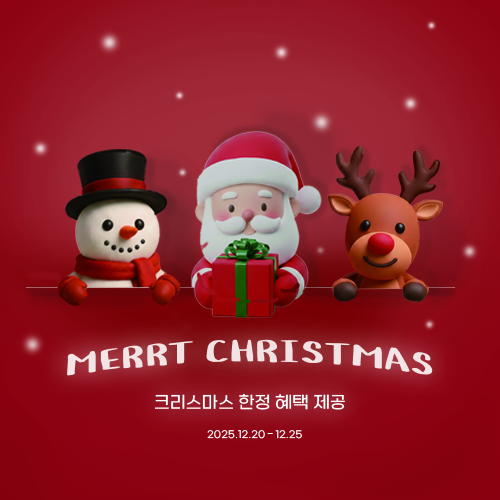
<style>
.page{position:relative;width:500px;height:500px}
.page>*{position:absolute;margin:0}
.t1{font:38.9px "Cafe24Behappy";letter-spacing:0.02em;color:#f1e3e5;scale:2.05 1}
.t2{font:17px "SBAggroL";letter-spacing:0.02em;color:#ffffff}
.t3{font:9.9px "SBAggroL";letter-spacing:0.02em;color:#ffffff}
.t4{font:9.9px "Gulim";letter-spacing:0.02em;color:#ffffff}
</style>
<div class="page">
<p class="t1" style="left:67px;top:339px;width:366px;height:37px">MERRT CHRISTMAS</p>
<p class="t2" style="left:155px;top:393px;width:190px;height:17px">크리스마스 한정 혜택 제공</p>
<p class="t3" style="left:207px;top:430px;width:95px;height:9px">2025.12.20 <span class="t4">–</span> 12.25</p>
</div>
